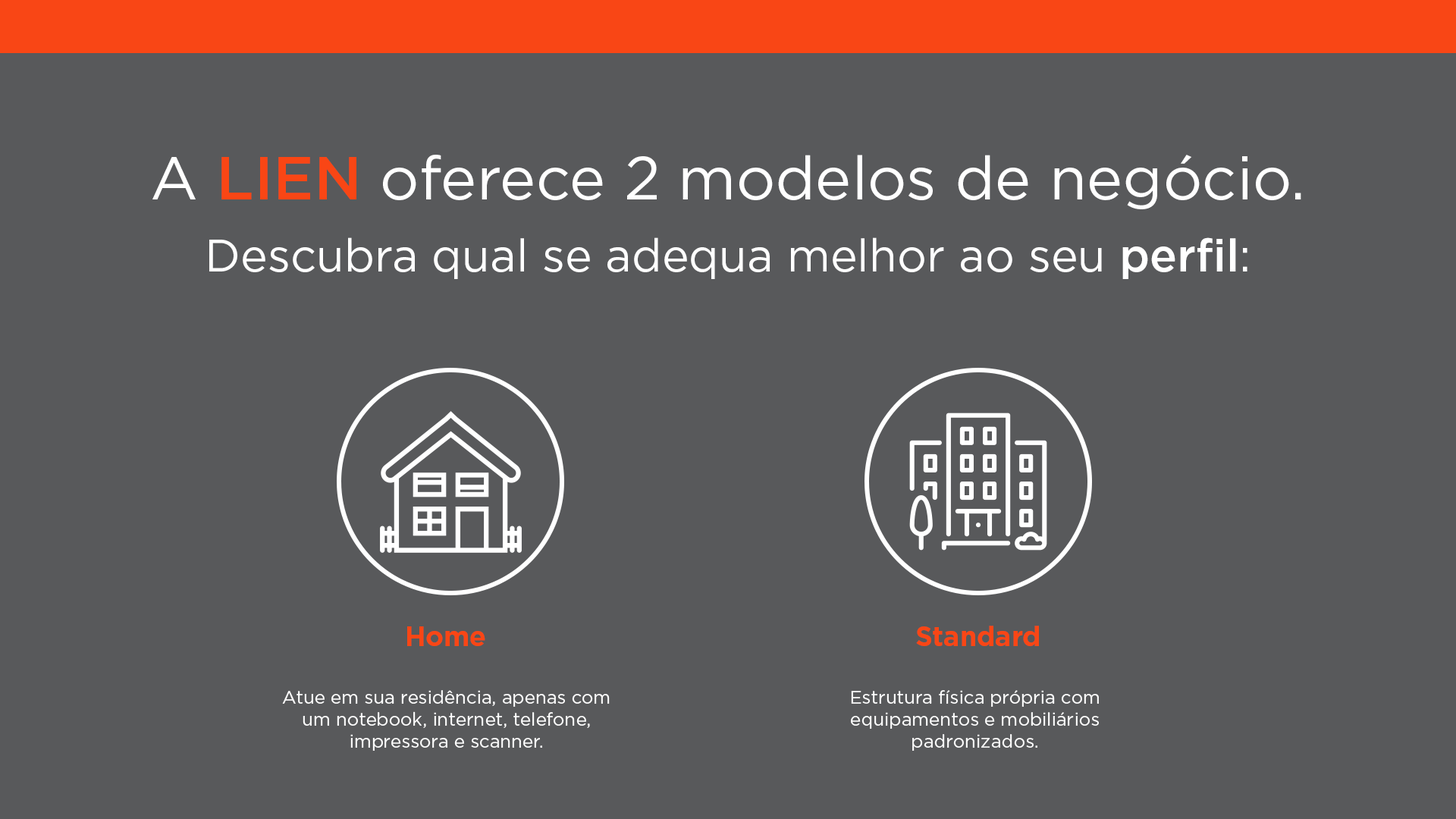
<style>
.page{position:relative;width:1456px;height:819px;background:#58595b}
.page>*{position:absolute;margin:0}
.t1{font:45.5px/72px "Gotham-Book";color:#ffffff}
.t2{font:60.7px/54.6px "Gotham-Book";color:#ffffff}
.t3{font:60.7px/75.8px "Gotham-Medium";color:#f94615}
.t4{font:60.7px/75.8px "Gotham-Book";color:#ffffff}
.t5{font:60.7px "Gotham-Book";color:#ffffff}
.t6{font:45.5px/72px "Gotham-Medium";color:#ffffff}
.t7{font:27.3px "Gotham-Bold";color:#f94615}
.t8{font:18.2px "Gotham-Book";color:#ffffff}
</style>
<div class="page">
<p class="t1" style="left:152px;top:155px;width:1149px;height:124px;text-align:center"><span class="t2">A </span><span class="t3">LIEN </span><span class="t4">oferece 2 modelos de </span><span class="t5">negócio.<br></span>Descubra qual se adequa melhor ao seu <span class="t6">perfil</span>:</p>
<p class="t7" style="left:407px;top:626px;width:78px;height:20px">Home</p>
<p class="t7" style="left:916px;top:626px;width:123px;height:20px">Standard</p>
<p class="t8" style="left:282px;top:690px;width:328px;height:61px;text-align:center">Atue em sua residência, apenas com um notebook, internet, telefone, impressora e scanner.</p>
<p class="t8" style="left:851px;top:690px;width:248px;height:61px;text-align:center">Estrutura física própria com equipamentos e mobiliários padronizados.</p>
</div>
